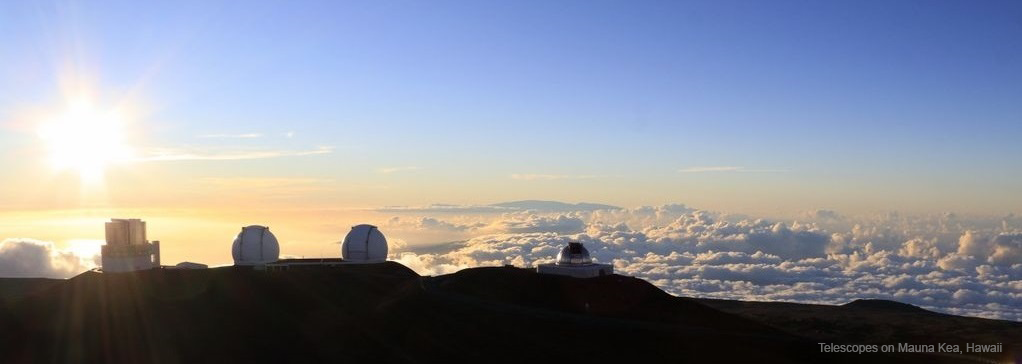
<style>
.page{position:relative;width:1022px;height:364px}
.page>*{position:absolute;margin:0}
.t1{font:12px "ArialMT";color:#6c6b69}
</style>
<div class="page">
<p class="t1" style="left:818px;top:343px;width:184px;height:11px">Telescopes on Mauna Kea, Hawaii</p>
</div>
